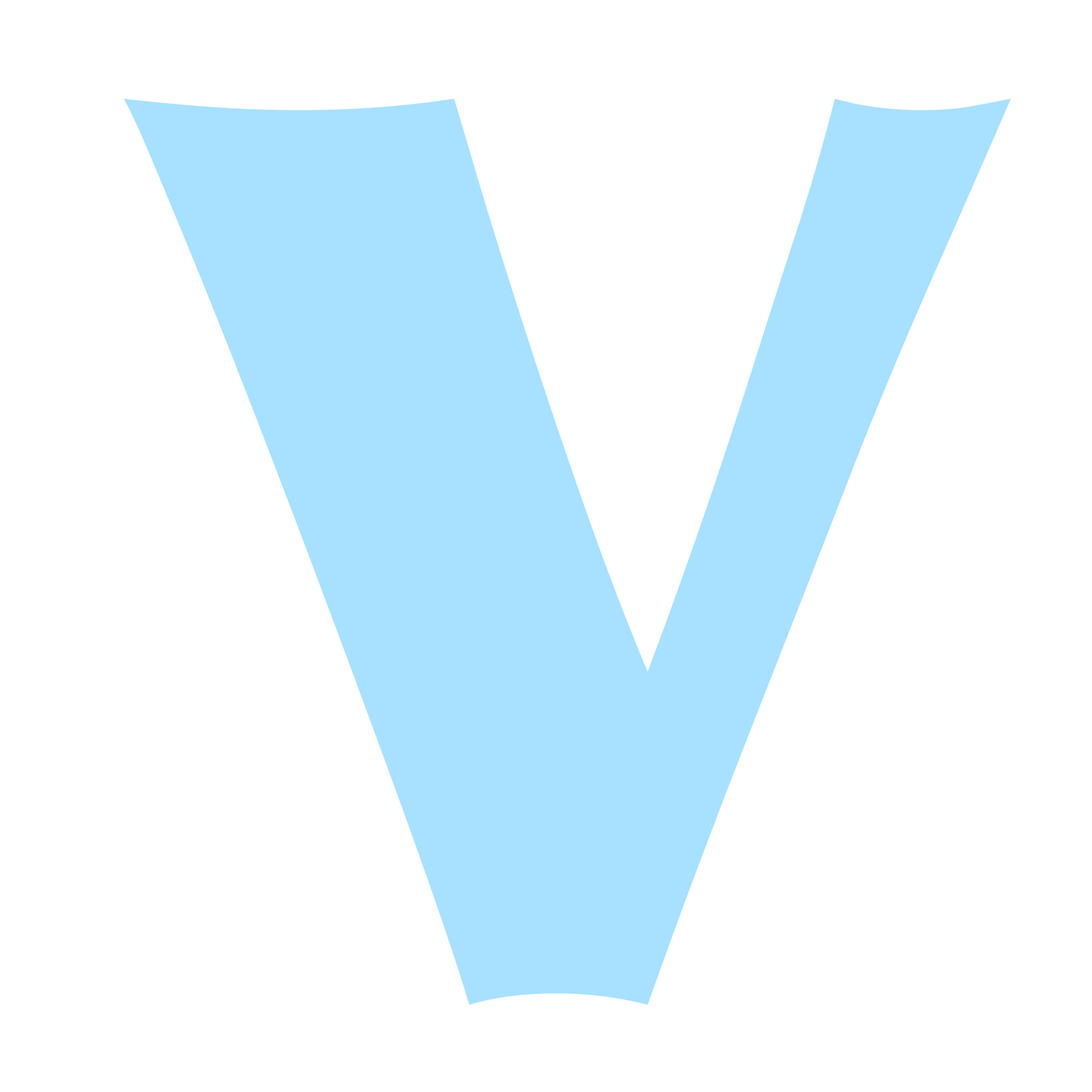
<style>
.page{position:relative;width:1092px;height:1092px;background:#ffffff}
.page>*{position:absolute;margin:0}
.t1{font:1265.1px "Optima-ExtraBlack";letter-spacing:-0.035em;color:#a7e1ff}
</style>
<div class="page">
<p class="t1" style="left:124px;top:99px;width:887px;height:906px">V</p>
</div>
